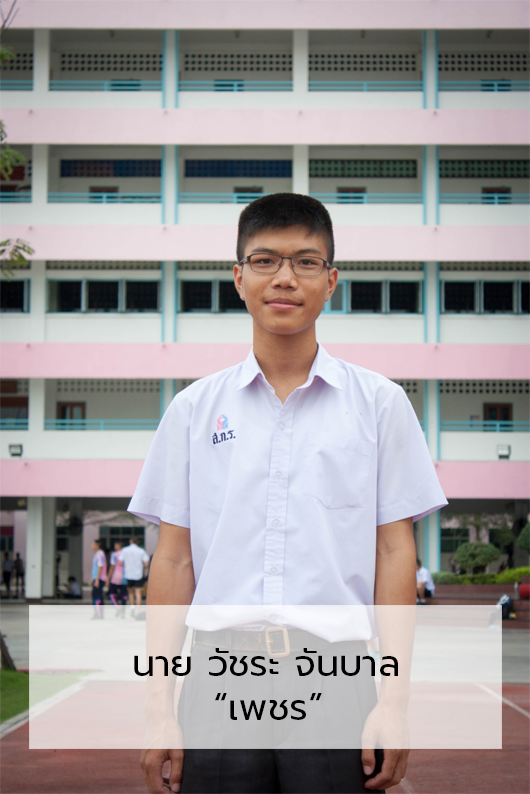
<style>
.page{position:relative;width:530px;height:794px}
.page>*{position:absolute;margin:0}
.t1{font:36.7px "Prompt-Regular";color:#000000}
</style>
<div class="page">
<p class="t1" style="left:134px;top:648px;width:264px;height:72px">นาย วัชระ จันบาล<br>      “เพชร”</p>
</div>
